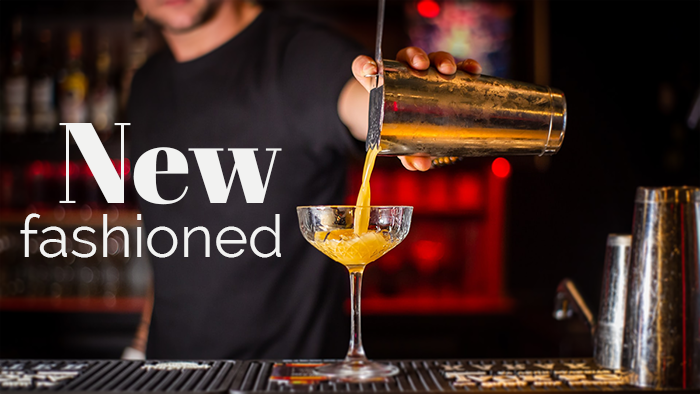
<style>
.page{position:relative;width:700px;height:394px}
.page>*{position:absolute;margin:0}
.t1{font:114.6px "AbrilFatface-Regular";color:#f2f2f1}
.t2{font:58.4px "Raleway";color:#f2f2f1}
</style>
<div class="page">
<p class="t1" style="left:59px;top:123px;width:223px;height:82px">New</p>
<p class="t2" style="left:20px;top:213px;width:261px;height:45px">fashioned</p>
</div>
